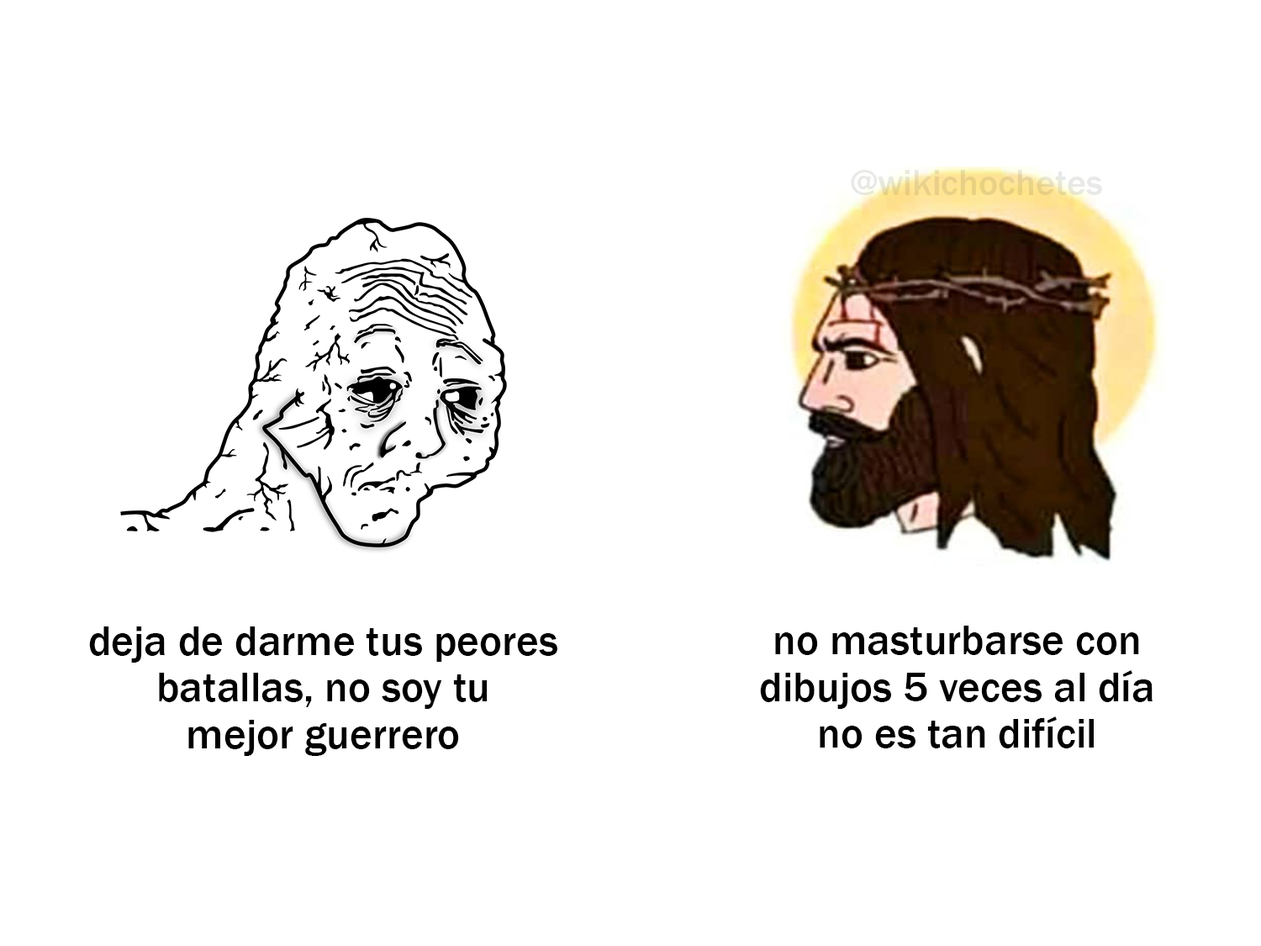
<style>
.page{position:relative;width:1261px;height:946px;background:#ffffff}
.page>*{position:absolute;margin:0}
.t1{font:37.1px "FranklinGothic-Medium"}
.t2{font:43px "FranklinGothic-Medium";color:#000000}
</style>
<div class="page">
<p class="t1" style="left:851px;top:170px;width:251px;height:25px">@wikichochetes</p>
<p class="t2" style="left:89px;top:626px;width:468px;height:130px;text-align:center">deja de darme tus peores<br>batallas, no soy tu<br>mejor guerrero</p>
<p class="t2" style="left:760px;top:625px;width:392px;height:123px;text-align:center">no masturbarse con<br>dibujos 5 veces al día<br>no es tan difícil</p>
</div>
